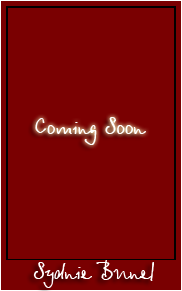
<style>
.page{position:relative;width:182px;height:291px;background:#7a0001}
.page>*{position:absolute;margin:0}
.t1{font:24px "BetinaScript";color:#ffffff}
</style>
<div class="page">
<p class="t1" style="left:35px;top:117px;width:111px;height:28px">Coming Soon</p>
<p class="t1" style="left:33px;top:260px;width:121px;height:28px">Sydnie Bunel</p>
</div>
